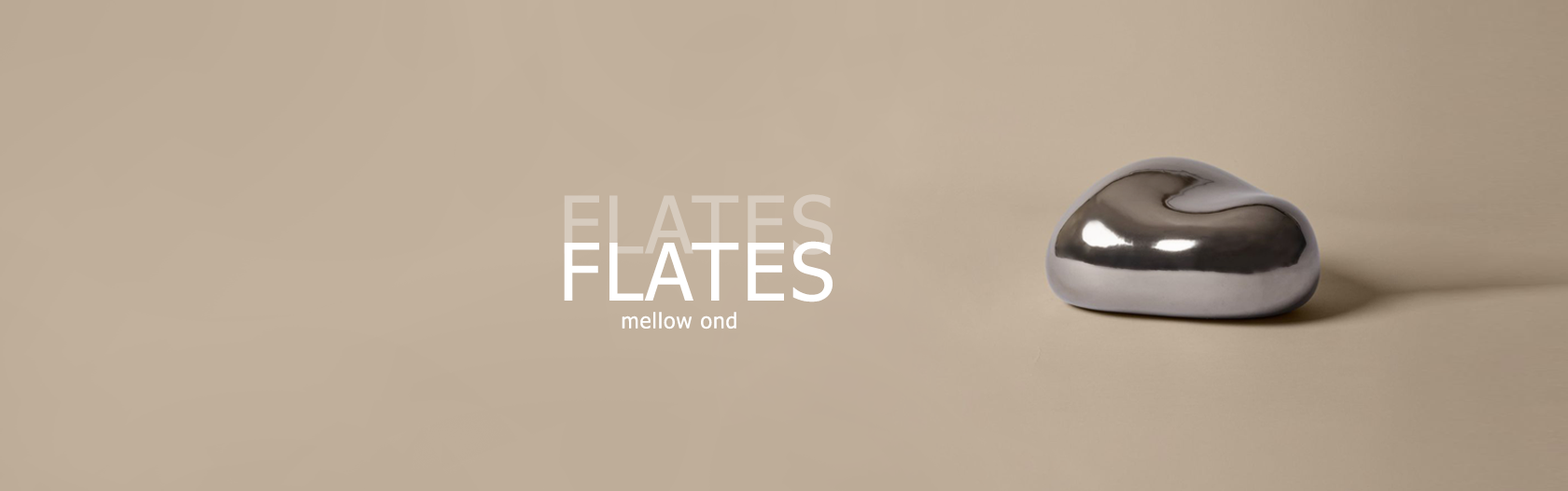
<style>
.page{position:relative;width:1568px;height:491px}
.page>*{position:absolute;margin:0}
.t1{font:79.5px "Tahoma";letter-spacing:0.045em;color:#d6cbbe}
.t2{font:79.5px "Tahoma";letter-spacing:0.045em;color:#ffffff}
.t3{font:21.2px "Tahoma";letter-spacing:0.045em;color:#ffffff}
</style>
<div class="page">
<p class="t1" style="left:564px;top:194px;width:269px;height:61px">FLATES</p>
<p class="t2" style="left:564px;top:241px;width:269px;height:61px">FLATES</p>
<p class="t3" style="left:622px;top:312px;width:114px;height:17px">mellow ond</p>
</div>
